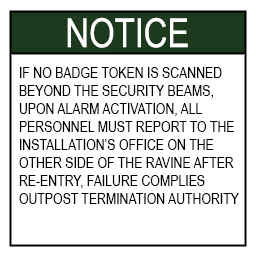
<style>
.page{position:relative;width:256px;height:256px;background:#ffffff}
.page>*{position:absolute;margin:0}
.t1{font:40px "ArialNarrow";color:#ffffff}
.t2{font:15px "ArialNarrow";color:#000000}
</style>
<div class="page">
<p class="t1" style="left:67px;top:17px;width:121px;height:31px">NOTICE</p>
<p class="t2" style="left:19px;top:67px;width:220px;height:137px">IF NO BADGE TOKEN IS SCANNED <br>BEYOND THE SECURITY BEAMS,<br>UPON ALARM ACTIVATION, ALL <br>PERSONNEL MUST REPORT TO THE <br>INSTALLATION’S OFFICE ON THE <br>OTHER SIDE OF THE RAVINE AFTER <br>RE-ENTRY, FAILURE COMPLIES<br>OUTPOST TERMINATION AUTHORITY</p>
</div>
